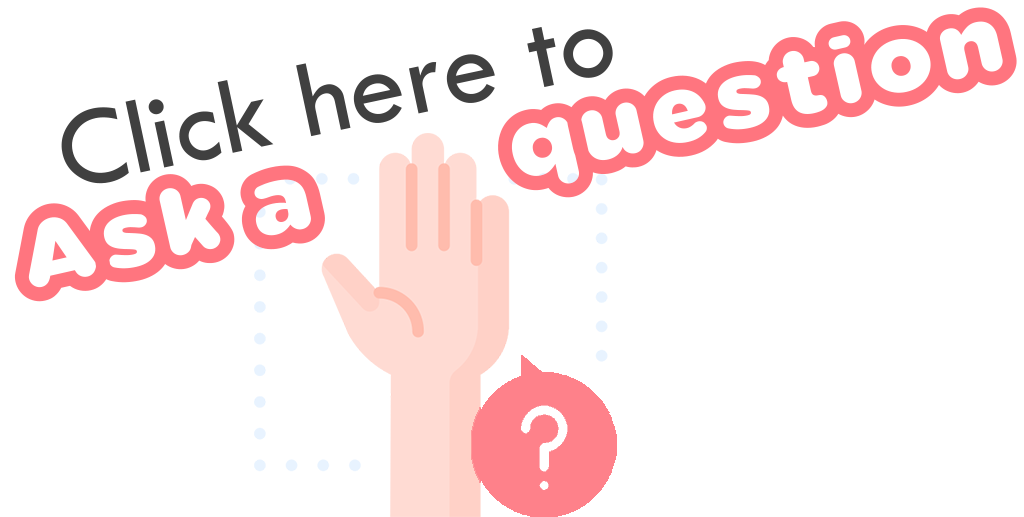
<style>
.page{position:relative;width:1024px;height:517px;background:#ffffff}
.page>*{position:absolute;margin:0}
.t1{font:114px "Vacaciones";color:#ff757f}
.t2{font:114px "TwCenMT-Regular";color:#404040}
</style>
<div class="page">
<p class="t1" style="left:14px;top:7px;width:1003px;height:295px;rotate:-13deg">Ask a        question</p>
<p class="t2" style="left:61px;top:27px;width:552px;height:157px;rotate:-12deg">Click here to</p>
</div>
